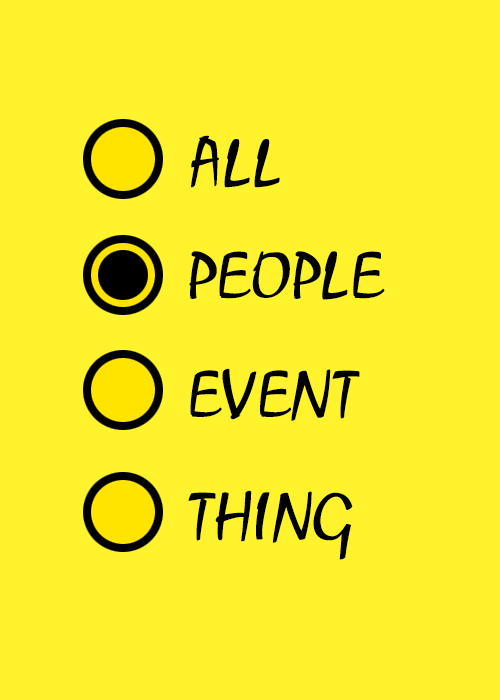
<style>
.page{position:relative;width:500px;height:700px;background:#fff32d}
.page>*{position:absolute;margin:0}
.t1{font:72px "ZephyrScriptFLF";color:#000000}
</style>
<div class="page">
<p class="t1" style="left:191px;top:135px;width:89px;height:53px">ALL</p>
<p class="t1" style="left:189px;top:251px;width:196px;height:49px">PEOPLE</p>
<p class="t1" style="left:190px;top:368px;width:170px;height:53px">EVENT</p>
<p class="t1" style="left:188px;top:490px;width:165px;height:70px">THING</p>
</div>
